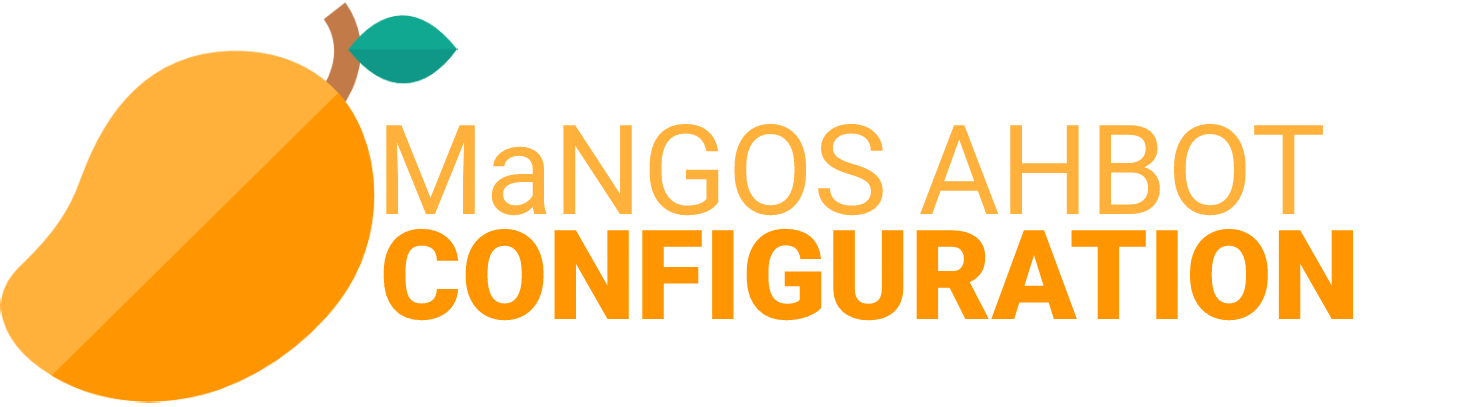
<style>
.page{position:relative;width:1458px;height:407px;background:#ffffff}
.page>*{position:absolute;margin:0}
.t1{font:125px "Roboto-Regular";color:#ffb13b}
.t2{font:125px "Roboto-Black";color:#ff9500}
</style>
<div class="page">
<p class="t1" style="left:386px;top:123px;width:937px;height:93px">MaNGOS AHBOT</p>
<p class="t2" style="left:383px;top:228px;width:971px;height:93px">CONFIGURATION</p>
</div>
